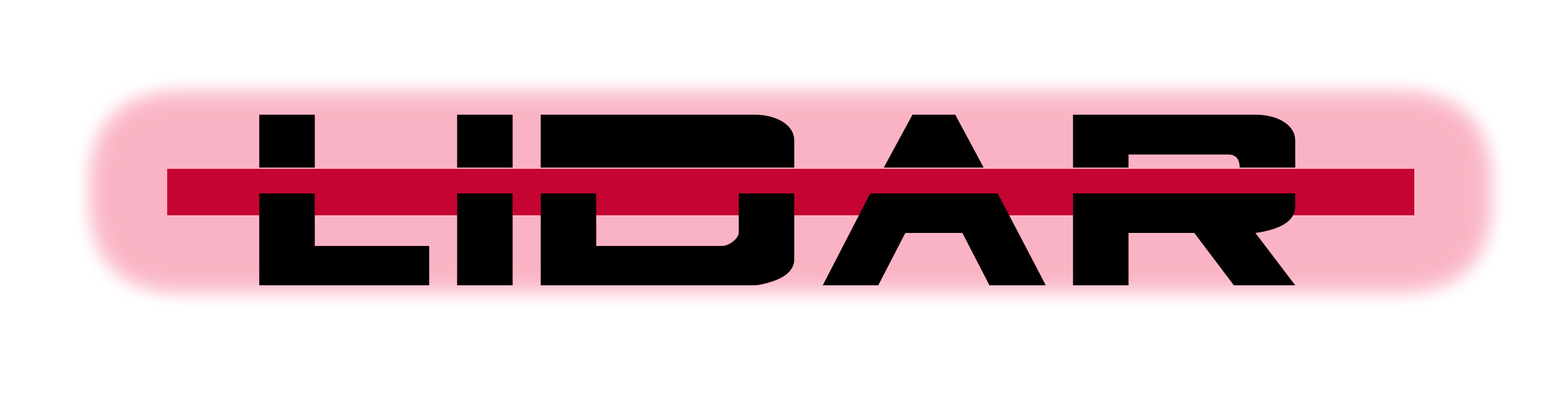
<style>
.page{position:relative;width:1568px;height:400px;background:#ffffff}
.page>*{position:absolute;margin:0}
.t1{font:250.8px "BorgNine-Regular";color:#000000;scale:1.06 1}
</style>
<div class="page">
<p class="t1" style="left:259px;top:114px;width:1036px;height:172px">LiDAR</p>
</div>
